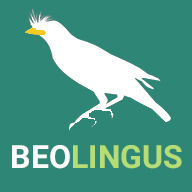
<style>
.page{position:relative;width:192px;height:192px;background:#2e8677}
.page>*{position:absolute;margin:0}
.t1{font:32px "Roboto-Bold";color:#b6dc75}
.t2{font:32px "Roboto-Bold";color:#fbfbfb}
</style>
<div class="page">
<p class="t1" style="left:12px;top:145px;width:170px;height:24px"><span class="t2">BEO</span>LINGUS</p>
</div>
